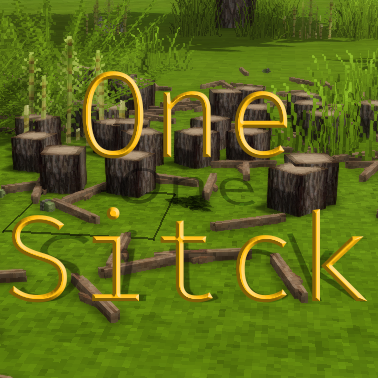
<style>
.page{position:relative;width:378px;height:378px}
.page>*{position:absolute;margin:0}
.t1{font:120px "FiraCode-Light"}
</style>
<div class="page">
<p class="t1" style="left:8px;top:71px;width:360px;height:232px;text-align:center">One<br>Sitck</p>
</div>
